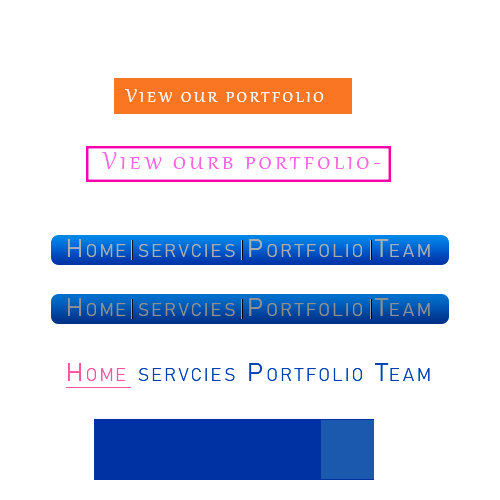
<style>
.page{position:relative;width:500px;height:500px;background:#ffffff}
.page>*{position:absolute;margin:0}
.t1{font:23.6px "Gabriola";letter-spacing:0.1em;color:#eae4e6;font-variant:small-caps}
.t2{font:30px "Gabriola";letter-spacing:0.1em;color:#fe61e2;font-variant:small-caps}
.t3{font:26.1px "Bahnschrift";letter-spacing:0.1em;color:#aeaeae;font-variant:small-caps}
.t4{font:26.1px "Bahnschrift";letter-spacing:0.1em;color:#909090;font-variant:small-caps}
.t5{font:26.1px "Bahnschrift";letter-spacing:0.1em;color:#003eb1;font-variant:small-caps}
</style>
<div class="page">
<p class="t1" style="left:125px;top:89px;width:198px;height:13px">View our portfolio</p>
<p class="t2" style="left:101px;top:152px;width:280px;height:17px">View ourb portfoliofolio</p>
<p class="t3" style="left:68px;top:239px;width:362px;height:18px">Home servcies Portfolio Team Contact</p>
<p class="t4" style="left:68px;top:298px;width:362px;height:18px">Home servcies Portfolio Team Contact</p>
<p class="t5" style="left:68px;top:363px;width:362px;height:18px">Home servcies Portfolio Team Contact</p>
</div>
